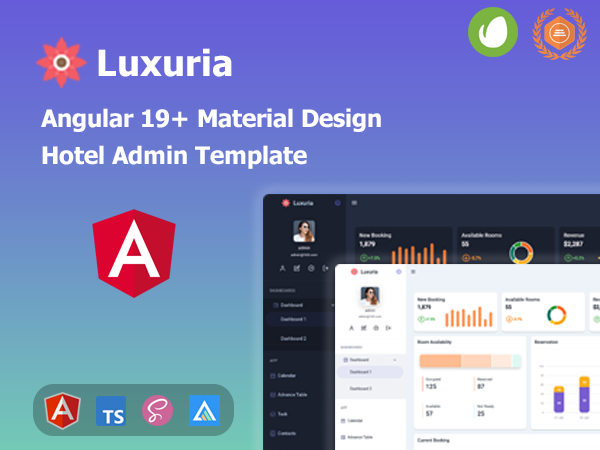
<style>
.page{position:relative;width:600px;height:450px}
.page>*{position:absolute;margin:0}
.t1{font:36px "Tahoma-Bold";color:#ffffff}
.t2{font:24px "Tahoma-Bold";color:#ffffff}
</style>
<div class="page">
<p class="t1" style="left:98px;top:48px;width:134px;height:29px">Luxuria</p>
<p class="t2" style="left:41px;top:108px;width:340px;height:24px">Angular 19+ Material Design</p>
<p class="t2" style="left:42px;top:145px;width:265px;height:24px">Hotel Admin Template</p>
</div>
